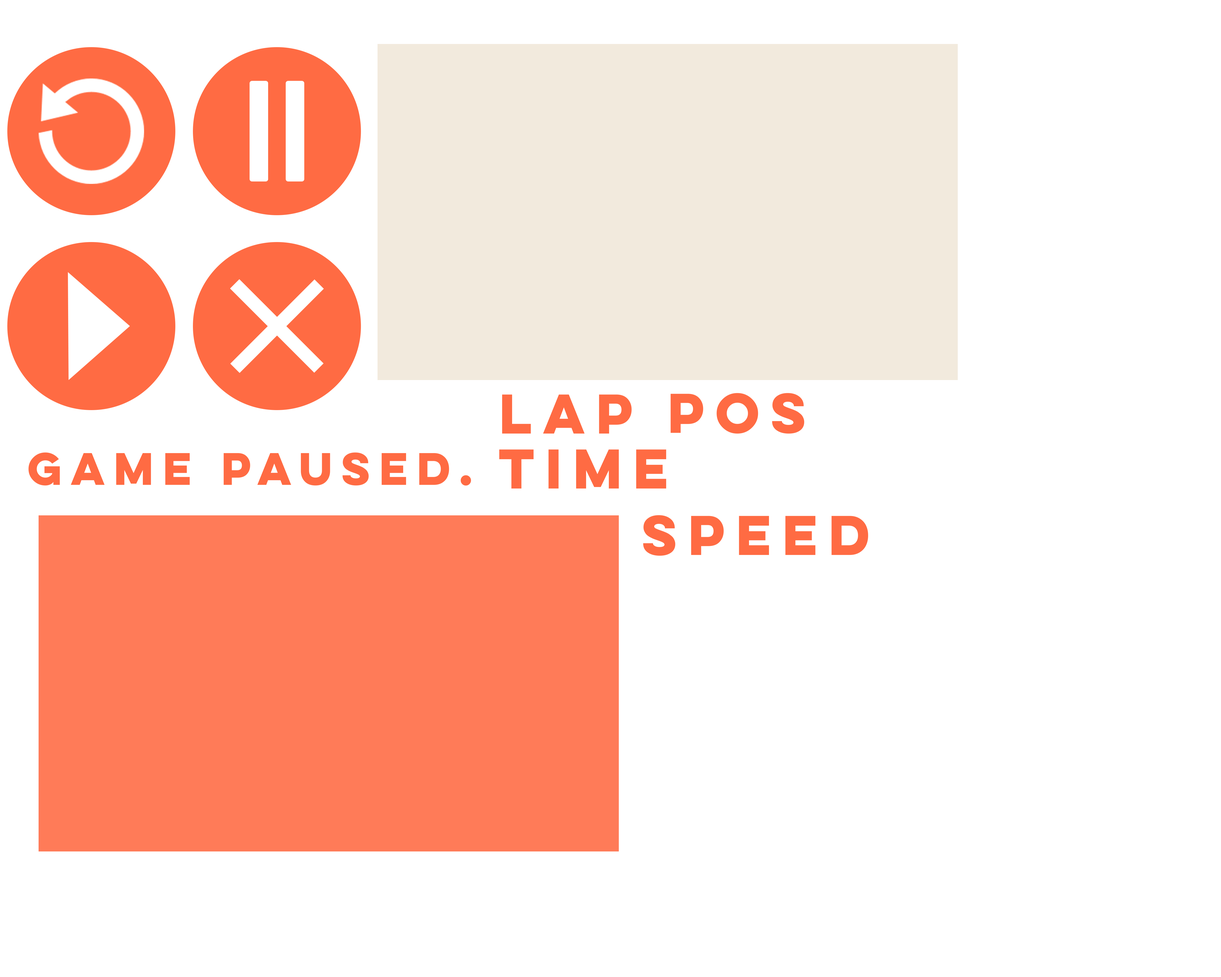
<style>
.page{position:relative;width:1221px;height:977px;background:#ffffff}
.page>*{position:absolute;margin:0}
.t1{font:50px "LuloCleanOne-Bold";color:#ff6b43}
.t2{font:40.7px "LuloCleanOne-Bold";color:#ff6b43}
</style>
<div class="page">
<p class="t1" style="left:502px;top:394px;width:130px;height:39px">Lap</p>
<p class="t1" style="left:671px;top:393px;width:133px;height:41px">pos</p>
<p class="t1" style="left:499px;top:449px;width:167px;height:39px">time</p>
<p class="t2" style="left:28px;top:452px;width:443px;height:33px">game paused.</p>
<p class="t1" style="left:643px;top:515px;width:225px;height:41px">speed</p>
</div>
